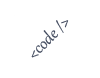
<style>
.page{position:relative;width:100px;height:78px;background:#ffffff}
.page>*{position:absolute;margin:0}
.t1{font:20px "Gabriola";color:#3d465a}
</style>
<div class="page">
<p class="t1" style="left:31px;top:20px;width:38px;height:38px;rotate:-45deg">&lt;code /&gt;</p>
</div>
